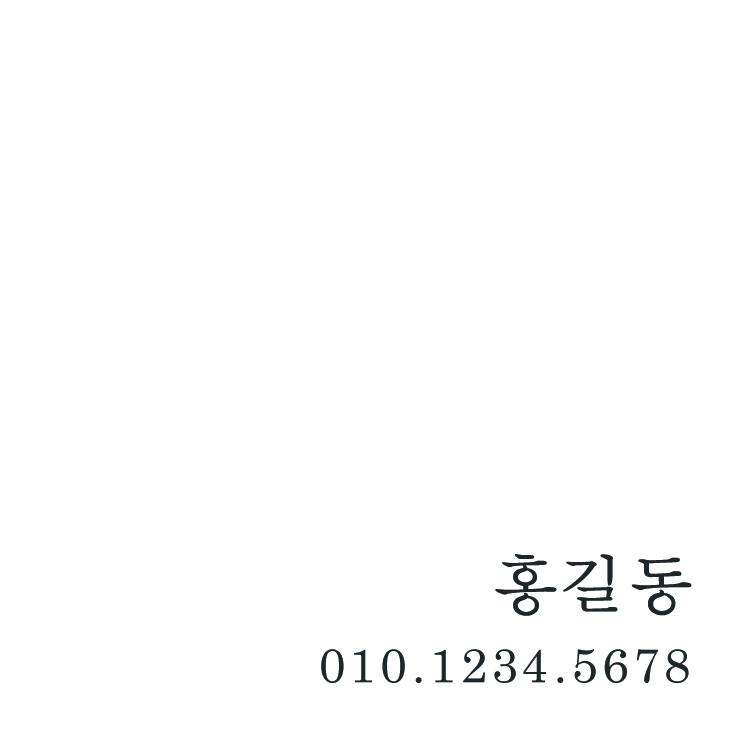
<style>
.page{position:relative;width:744px;height:744px;background:#ffffff}
.page>*{position:absolute;margin:0}
.t1{font:66px "AppleMyungjo";color:#1e2629;font-weight:bold}
.t2{font:48px "AppleMyungjo";color:#1e2629}
</style>
<div class="page">
<p class="t1" style="left:495px;top:554px;width:197px;height:62px">홍길동</p>
<p class="t2" style="left:321px;top:649px;width:368px;height:34px">010.1234.5678</p>
</div>
